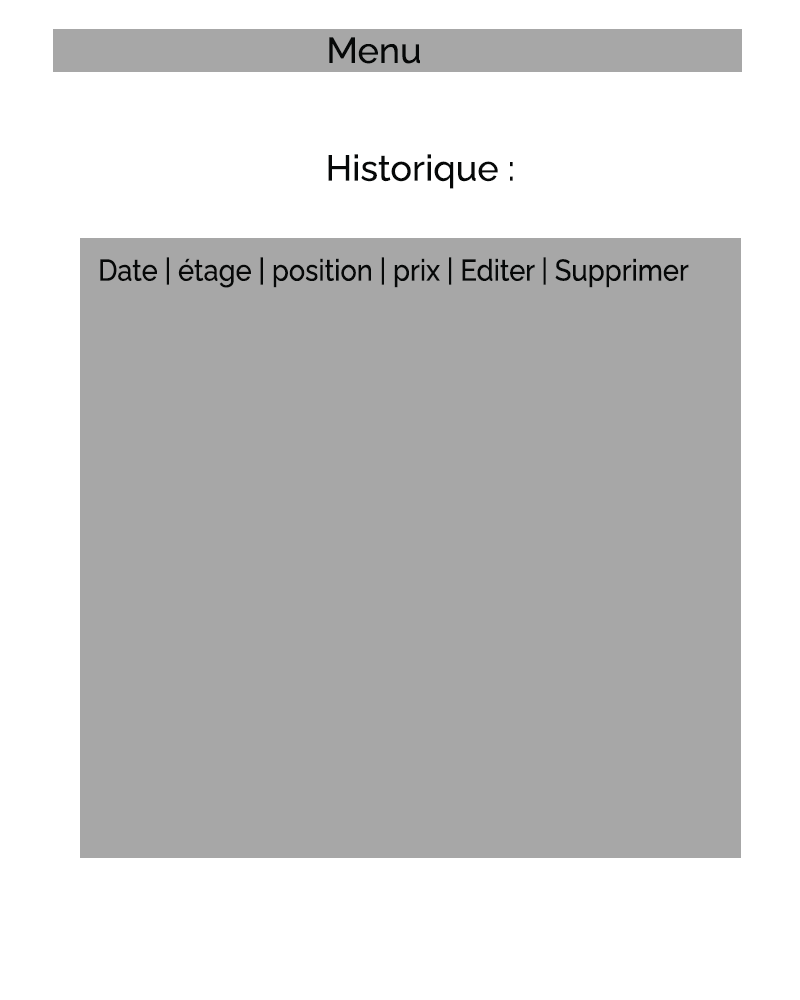
<style>
.page{position:relative;width:800px;height:1000px;background:#a7a7a7}
.page>*{position:absolute;margin:0}
.t1{font:36px "Raleway-Medium";color:#060808}
.t2{font:30.1px "Raleway-Medium";color:#060808;scale:0.9 1}
</style>
<div class="page">
<p class="t1" style="left:329px;top:37px;width:91px;height:27px">Menu</p>
<p class="t1" style="left:328px;top:154px;width:185px;height:35px">Historique :</p>
<p class="t2" style="left:100px;top:257px;width:589px;height:31px">Date | étage | position | prix | Editer | Supprimer</p>
</div>
